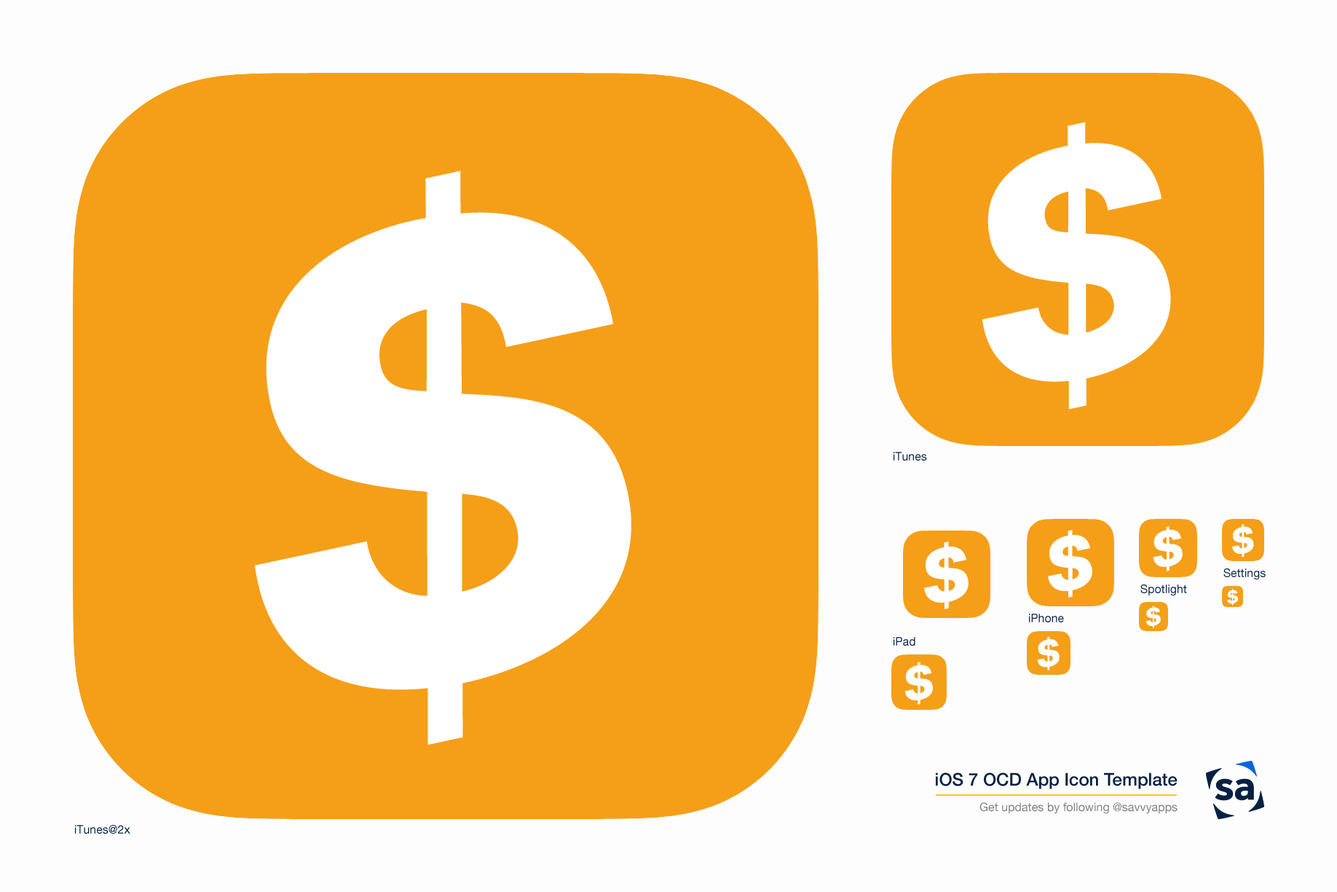
<style>
.page{position:relative;width:1337px;height:892px;background:#f59f18}
.page>*{position:absolute;margin:0}
.t1{font:11.7px "HelveticaNeueLTPro-Roman";color:#042043}
.t2{font:8.7px "MyriadPro-Regular";color:#042043}
</style>
<div class="page">
<p class="t1" style="left:894px;top:452px;width:33px;height:8px">iTunes</p>
<p class="t1" style="left:1224px;top:568px;width:42px;height:12px">Settings</p>
<p class="t1" style="left:1141px;top:584px;width:46px;height:12px">Spotlight</p>
<p class="t1" style="left:1029px;top:613px;width:35px;height:9px">iPhone</p>
<p class="t1" style="left:894px;top:637px;width:22px;height:8px">iPad</p>
<p class="t2" style="left:936px;top:772px;width:242px;height:42px;text-align:right">iOS 7 OCD App Icon Template<br>Get updates by following @savvyapps</p>
<p class="t1" style="left:75px;top:825px;width:55px;height:8px">iTunes@2x</p>
</div>
